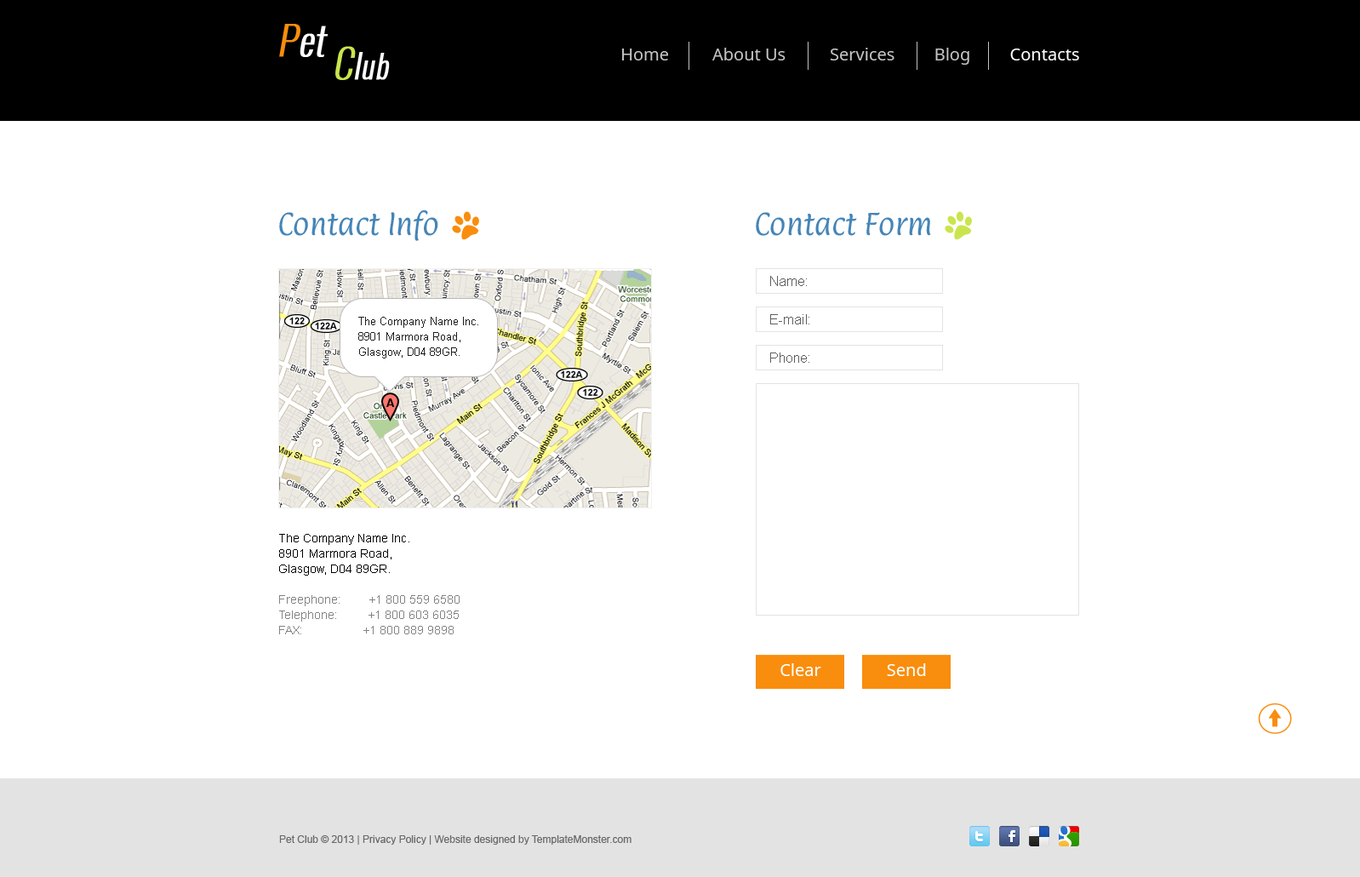
<style>
.page{position:relative;width:1360px;height:877px;background:#ffffff}
.page>*{position:absolute;margin:0}
.t1{font:38.6px/23.1px "Oswald-Light";color:#ffffff;font-weight:bold;font-style:italic}
.t2{font:38.3px/23.1px "Oswald-Light";color:#f98d0d;font-weight:bold;font-style:italic}
.t3{font:38.3px/23.1px "Oswald-Light";color:#c9e54e;font-weight:bold;font-style:italic}
.t4{font:32.1px/23.1px "Oswald-Light";color:#ffffff;font-weight:bold;font-style:italic}
.t5{font:30.6px/23.1px "Oswald-Light";color:#ffffff;font-weight:bold;font-style:italic}
.t6{font:17px "NotoSans";color:#c5c3c3}
.t7{font:17px "NotoSans";color:#ffffff}
.t8{font:25.5px "Paprika-Regular";color:#4585b7}
.t9{font:13.6px "ArialMT";color:#5e5e5e}
.t10{font:11.1px/15.3px "ArialMT";color:#1e1e1e}
.t11{font:11.1px "Arial-BoldMT";color:#000000}
.t12{font:11.9px/15.3px "ArialMT";color:#848383}
.t13{font:11.9px/15.3px "ArialMT";color:#000000}
.t14{font:10.2px "ArialMT";color:#6b6868}
</style>
<div class="page">
<p class="t1" style="left:279px;top:24px;width:111px;height:56px;text-align:center"><span class="t2">P</span>et <br>                 <span class="t3">C</span><span class="t4">l</span><span class="t5">ub</span></p>
<p class="t6" style="left:622px;top:49px;width:47px;height:11px">Home</p>
<p class="t6" style="left:712px;top:48px;width:74px;height:12px">About Us</p>
<p class="t6" style="left:830px;top:48px;width:65px;height:12px">Services</p>
<p class="t6" style="left:935px;top:48px;width:34px;height:17px">Blog</p>
<p class="t7" style="left:1010px;top:49px;width:69px;height:11px">Contacts</p>
<p class="t8" style="left:279px;top:210px;width:159px;height:31px">Contact Info</p>
<p class="t8" style="left:756px;top:212px;width:175px;height:24px">Contact Form</p>
<p class="t9" style="left:770px;top:276px;width:37px;height:10px">Name:</p>
<p class="t10" style="left:358px;top:317px;width:120px;height:41px">The Company Name Inc.<br>8901 Marmora Road,<br>Glasgow, D04 89GR.</p>
<p class="t9" style="left:770px;top:314px;width:39px;height:10px">E-mail:</p>
<p class="t9" style="left:770px;top:352px;width:39px;height:11px">Phone:</p>
<p class="t11" style="left:386px;top:398px;width:9px;height:9px">A</p>
<p class="t12" style="left:279px;top:534px;width:181px;height:100px"><span class="t13">The Company Name Inc.<br>8901 Marmora Road,<br>Glasgow, D04 89GR.<br></span><br>Freephone:        +1 800 559 6580<br>Telephone:         +1 800 603 6035<br>FAX:                  +1 800 889 9898</p>
<p class="t7" style="left:781px;top:663px;width:40px;height:13px">Clear</p>
<p class="t7" style="left:887px;top:663px;width:39px;height:13px">Send</p>
<p class="t14" style="left:279px;top:835px;width:353px;height:9px">Pet Club © 2013 | Privacy Policy | Website designed by TemplateMonster.com</p>
</div>
